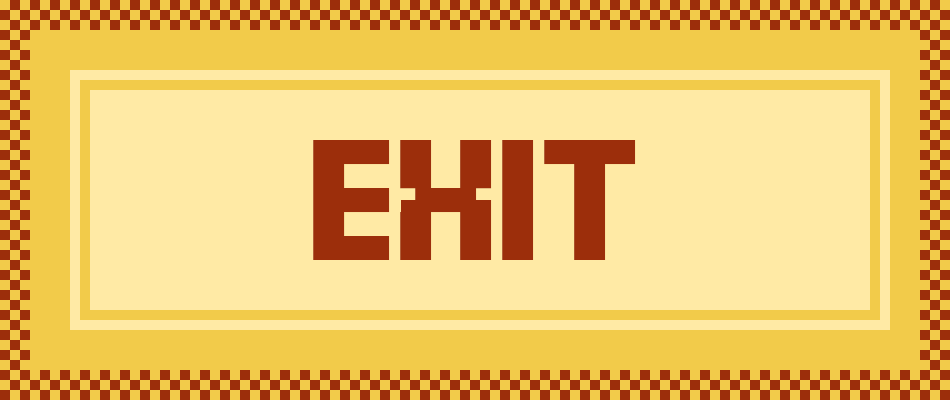
<style>
.page{position:relative;width:950px;height:400px;background:#ffeaa5}
.page>*{position:absolute;margin:0}
.t1{font:96px "FFFForward";letter-spacing:-0.025em;color:#9c2e0b;scale:1.25 1}
</style>
<div class="page">
<p class="t1" style="left:313px;top:140px;width:323px;height:120px">EXIT</p>
</div>
